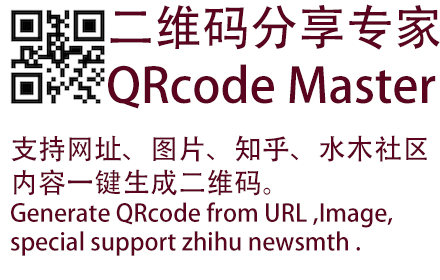
<style>
.page{position:relative;width:440px;height:280px;background:#ffffff}
.page>*{position:absolute;margin:0}
.t1{font:48px "AdobeHeitiStd-Regular";color:#5b041f}
.t2{font:24px "AdobeHeitiStd-Regular";color:#5b041f}
.t3{font:28px "AdobeHeitiStd-Regular";color:#5b041f}
</style>
<div class="page">
<p class="t1" style="left:108px;top:4px;width:332px;height:105px;text-align:justify">二维码分享专家<br>QRcode Master</p>
<p class="t2" style="left:11px;top:135px;width:416px;height:121px;text-align:justify"><span class="t3">支持网址、图片、知乎、水木社区<br>内容一键生成二维码。<br></span>Generate QRcode from URL ,Image,<br>special support zhihu newsmth .</p>
</div>
